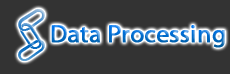
<style>
.page{position:relative;width:230px;height:74px;background:#333333}
.page>*{position:absolute;margin:0}
.t1{font:25px "MyriadPro-Regular";font-weight:bold}
</style>
<div class="page">
<p class="t1" style="left:51px;top:25px;width:174px;height:23px">Data Processing</p>
</div>
